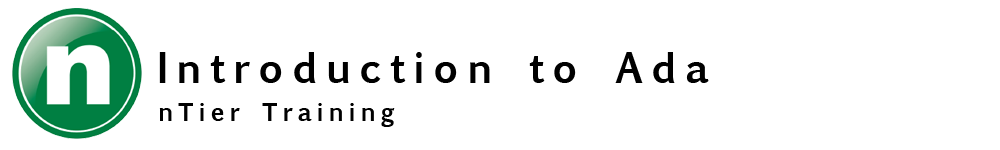
<style>
.page{position:relative;width:1000px;height:150px;background:#ffffff}
.page>*{position:absolute;margin:0}
.t1{font:40px "EuphemiaUCAS-Bold";letter-spacing:0.2em;color:#000000}
.t2{font:24px "EuphemiaUCAS-Bold";letter-spacing:0.2em;color:#000000}
</style>
<div class="page">
<p class="t1" style="left:159px;top:52px;width:550px;height:31px">Introduction to Ada</p>
<p class="t2" style="left:159px;top:103px;width:236px;height:24px">nTier Training</p>
</div>
